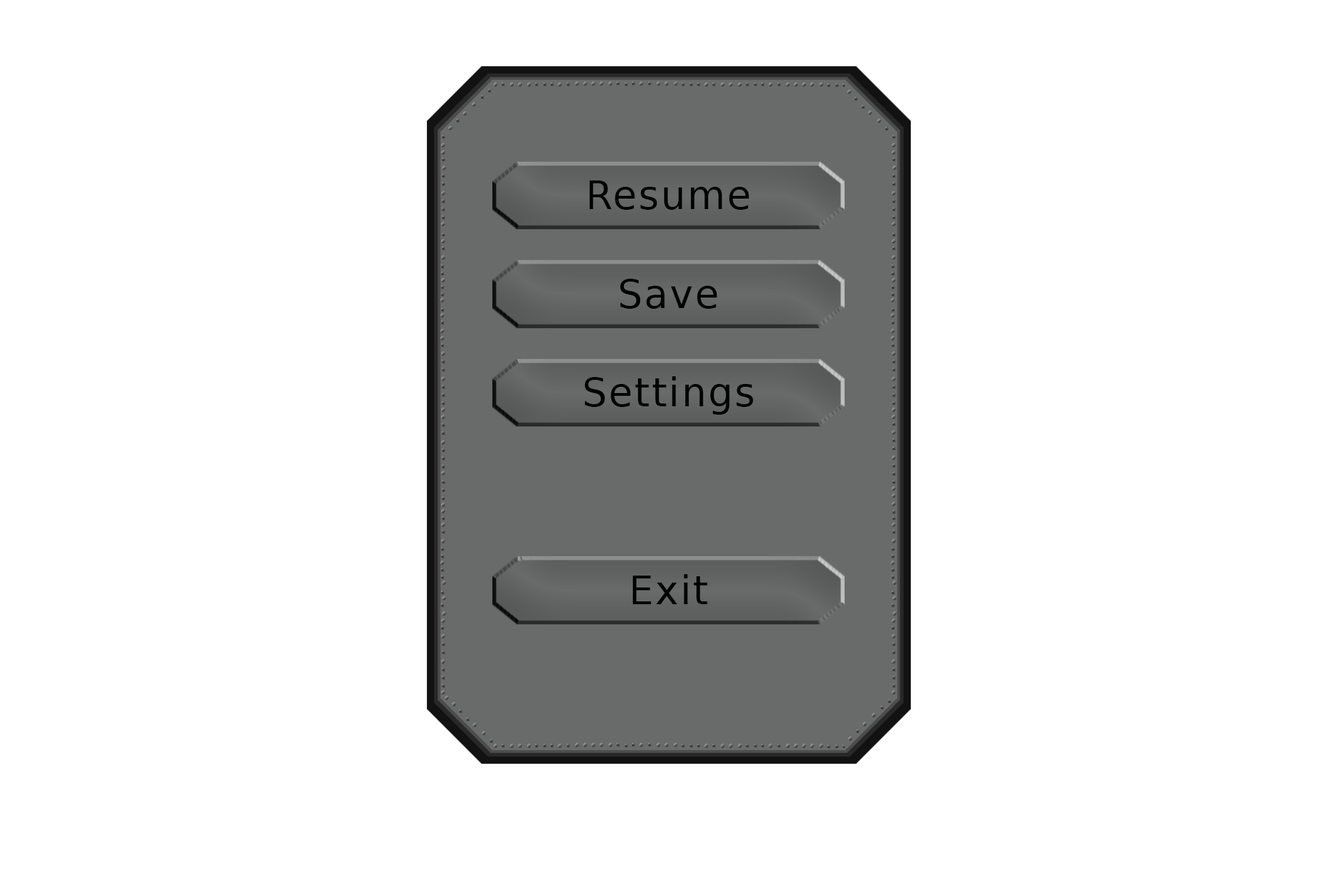
<style>
.page{position:relative;width:1337px;height:892px;background:#ffffff}
.page>*{position:absolute;margin:0}
.t1{font:38.9px "BitstreamVeraSans-Roman";letter-spacing:0.05em;color:#000000}
</style>
<div class="page">
<p class="t1" style="left:589px;top:180px;width:161px;height:30px">Resume</p>
<p class="t1" style="left:620px;top:279px;width:97px;height:30px">Save</p>
<p class="t1" style="left:584px;top:376px;width:170px;height:38px">Settings</p>
<p class="t1" style="left:632px;top:574px;width:76px;height:30px">Exit</p>
</div>
